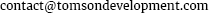
<style>
.page{position:relative;width:209px;height:20px;background:#ffffff}
.page>*{position:absolute;margin:0}
.t1{font:12px "Merriweather-Regular";color:#000000}
</style>
<div class="page">
<p class="t1" style="left:0px;top:0px;width:209px;height:13px">contact@tomsondevelopment.com</p>
</div>
